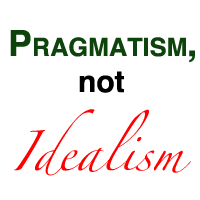
<style>
.page{position:relative;width:200px;height:200px;background:#ffffff}
.page>*{position:absolute;margin:0}
.t1{font:36px "Helvetica-Bold";color:#0d440c;font-variant:small-caps}
.t2{font:36px "Helvetica-Bold";color:#0d440c}
.t3{font:30px "Helvetica-Bold";color:#000000}
.t4{font:36px "Zapfino";color:#fe0000}
</style>
<div class="page">
<p class="t1" style="left:10px;top:30px;width:185px;height:33px"><span class="t2">P</span>ragmatism<span class="t2">,</span></p>
<p class="t3" style="left:79px;top:71px;width:45px;height:22px">not</p>
<p class="t4" style="left:14px;top:109px;width:177px;height:67px">Idealism</p>
</div>
